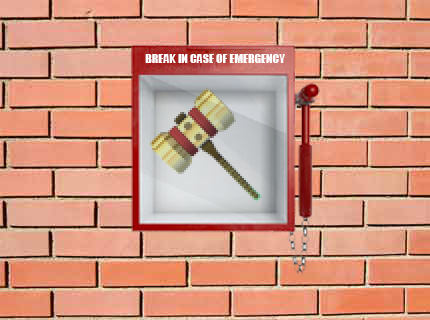
<style>
.page{position:relative;width:430px;height:320px}
.page>*{position:absolute;margin:0}
.t1{font:12px "Impact";color:#ffffff}
</style>
<div class="page">
<p class="t1" style="left:145px;top:54px;width:140px;height:9px">BREAK IN CASE OF EMERGENCY</p>
</div>
